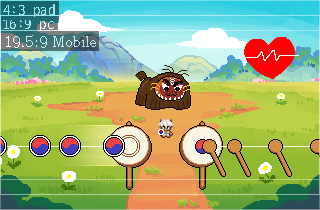
<style>
.page{position:relative;width:320px;height:210px}
.page>*{position:absolute;margin:0}
.t1{font:15px "D2Codingligature";color:#94e6ef}
.t2{font:15px "D2Codingligature"}
.t3{font:14px "AdobeMyungjoStd-Medium"}
</style>
<div class="page">
<p class="t1" style="left:3px;top:4px;width:52px;height:13px">4:3 pad</p>
<p class="t2" style="left:3px;top:19px;width:51px;height:12px">16:9 pc</p>
<p class="t3" style="left:6px;top:35px;width:90px;height:13px">19.5:9 Mobile</p>
</div>
